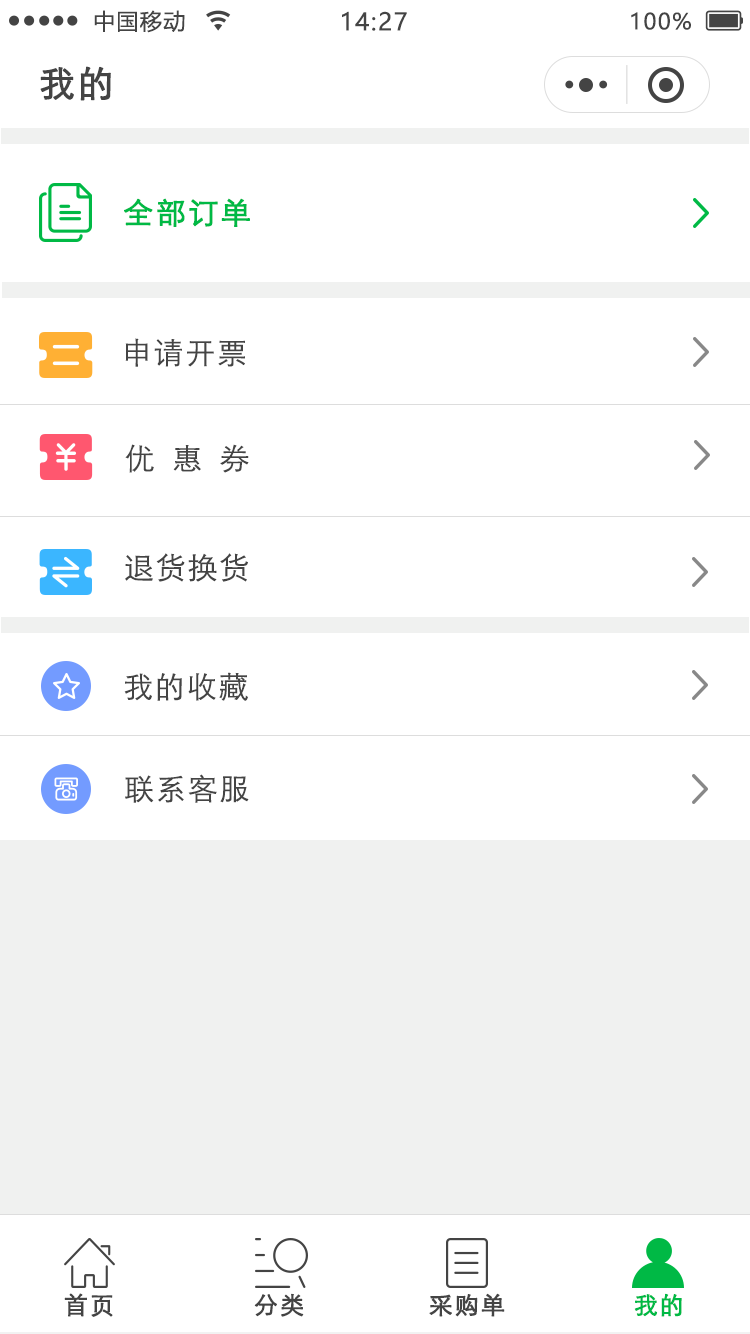
<style>
.page{position:relative;width:750px;height:1334px;background:#ffffff}
.page>*{position:absolute;margin:0}
.t1{font:22px "MicrosoftYaHei";letter-spacing:0.06em;color:#444444}
.t2{font:24px "MicrosoftYaHei";letter-spacing:0.06em;color:#444444}
.t3{font:36px "STXihei";letter-spacing:0.06em;color:#444444;font-weight:bold}
.t4{font:30px "STXihei";letter-spacing:0.06em;color:#00b945;font-weight:bold}
.t5{font:30px "STXihei";letter-spacing:0.06em;color:#444444}
.t6{font:30px "STXihei";letter-spacing:0.58em;color:#444444}
.t7{font:24px "STXihei";letter-spacing:0.06em;color:#444444;font-weight:bold}
.t8{font:24px "STXihei";letter-spacing:0.06em;color:#00b945;font-weight:bold}
</style>
<div class="page">
<p class="t1" style="left:94px;top:10px;width:91px;height:23px">中国移动</p>
<p class="t2" style="left:342px;top:11px;width:65px;height:20px">14:27</p>
<p class="t1" style="left:631px;top:12px;width:60px;height:18px">100%</p>
<p class="t3" style="left:40px;top:66px;width:71px;height:35px">我的</p>
<p class="t4" style="left:124px;top:198px;width:126px;height:29px">全部订单</p>
<p class="t5" style="left:125px;top:338px;width:120px;height:29px">申请开票</p>
<p class="t6" style="left:125px;top:444px;width:124px;height:29px">优惠券</p>
<p class="t5" style="left:125px;top:553px;width:123px;height:29px">退货换货</p>
<p class="t5" style="left:124px;top:672px;width:124px;height:29px">我的收藏</p>
<p class="t5" style="left:125px;top:774px;width:124px;height:29px">联系客服</p>
<p class="t7" style="left:64px;top:1293px;width:49px;height:24px">首页</p>
<p class="t7" style="left:254px;top:1293px;width:50px;height:24px">分类</p>
<p class="t7" style="left:429px;top:1293px;width:76px;height:24px">采购单</p>
<p class="t8" style="left:634px;top:1293px;width:48px;height:24px">我的</p>
</div>
